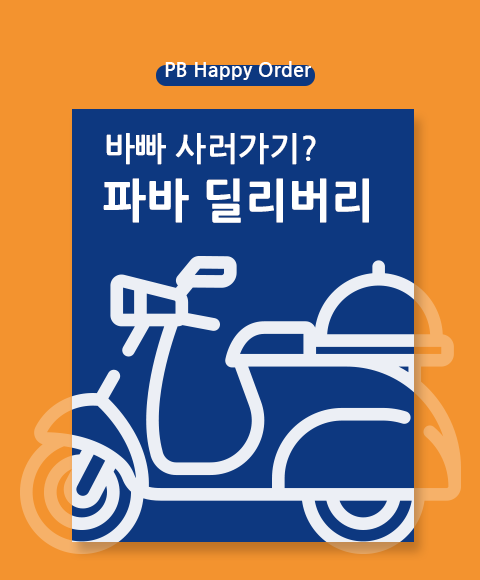
<style>
.page{position:relative;width:480px;height:580px;background:#0d3880}
.page>*{position:absolute;margin:0}
.t1{font:20px "NanumGothicBold";color:#ffffff}
.t2{font:32.8px "NanumGothicBold";color:#ffffff}
.t3{font:45.7px "NanumGothicExtraBold";color:#ffffff}
</style>
<div class="page">
<p class="t1" style="left:165px;top:61px;width:146px;height:19px">PB Happy Order</p>
<p class="t2" style="left:106px;top:133px;width:210px;height:32px">바빠 사러가기?</p>
<p class="t3" style="left:103px;top:178px;width:266px;height:45px">파바 딜리버리</p>
</div>
